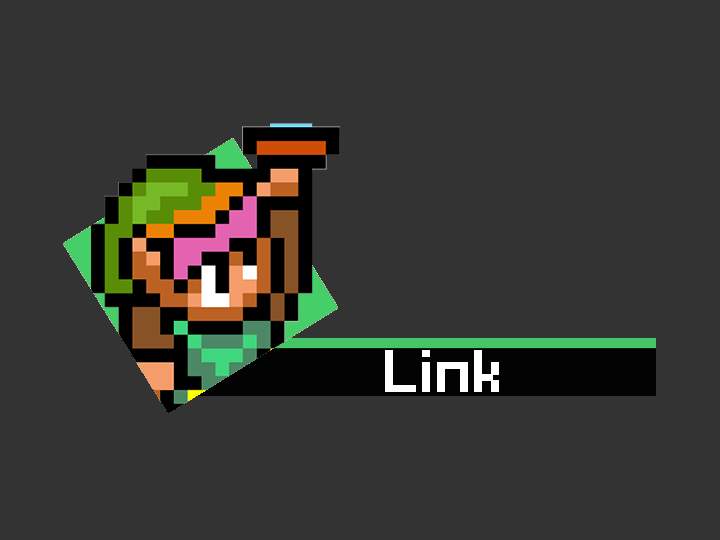
<style>
.page{position:relative;width:720px;height:540px;background:#333333}
.page>*{position:absolute;margin:0}
.t1{font:70px "Á¤9";letter-spacing:0.01em;color:#ffffff;font-weight:bold}
</style>
<div class="page">
<p class="t1" style="left:385px;top:350px;width:114px;height:42px">Link</p>
</div>
